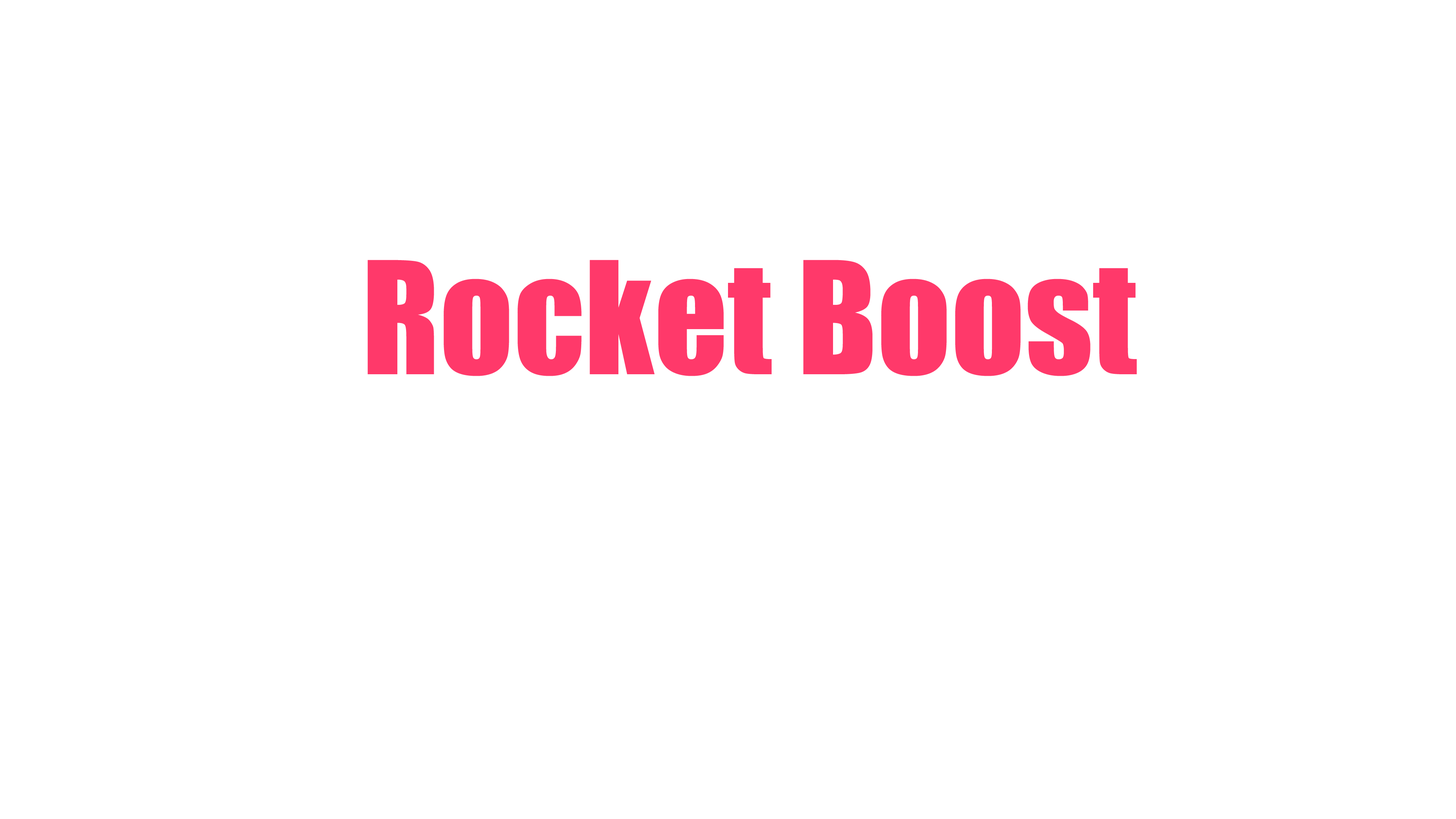
<style>
.page{position:relative;width:1456px;height:819px;background:#ffffff}
.page>*{position:absolute;margin:0}
.t1{font:144.5px "Impact";color:#ff396a}
</style>
<div class="page">
<p class="t1" style="left:367px;top:260px;width:770px;height:116px">Rocket Boost</p>
</div>
